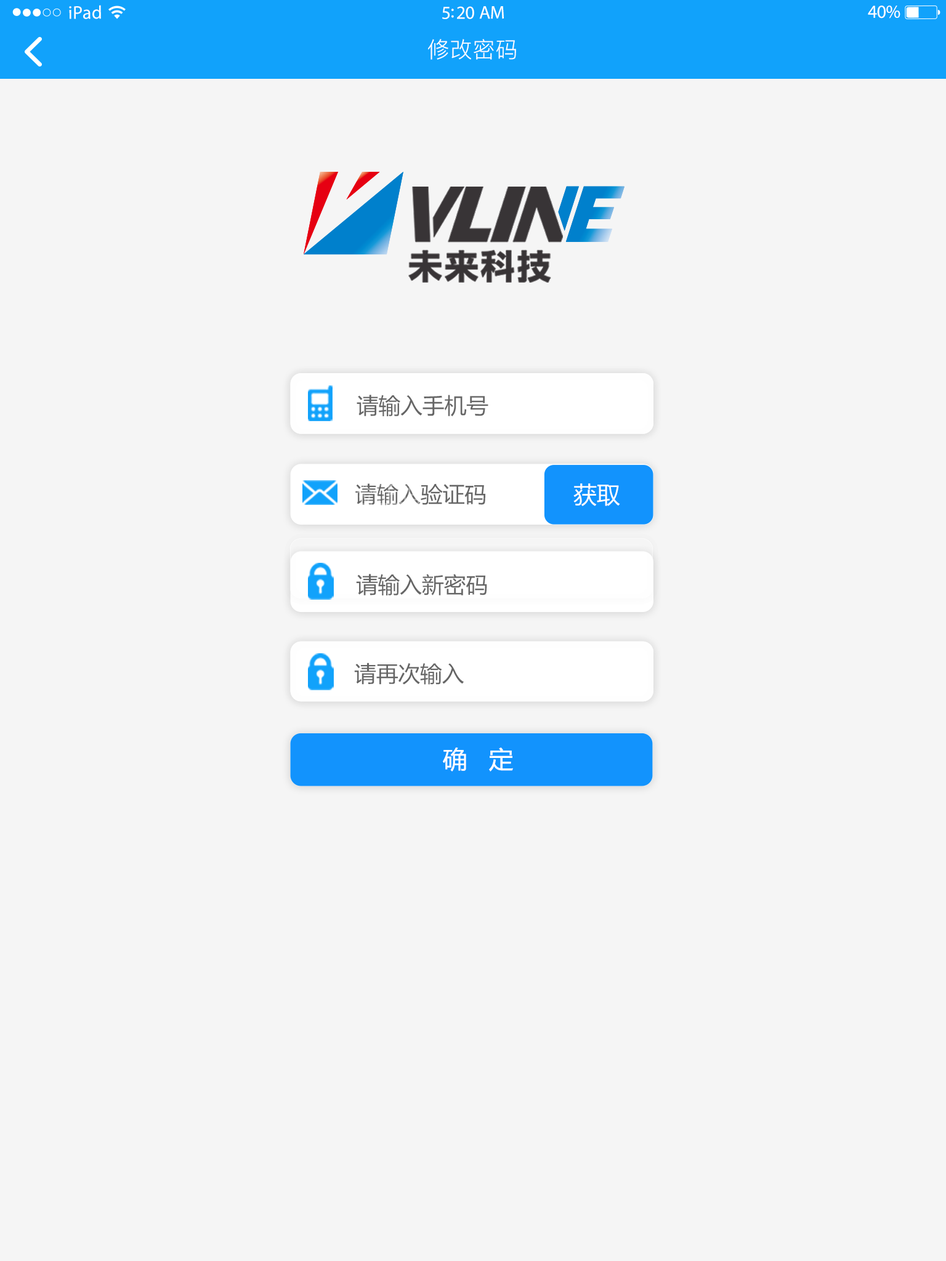
<style>
.page{position:relative;width:946px;height:1261px;background:#f5f5f5}
.page>*{position:absolute;margin:0}
.t1{font:18.5px "MyriadPro-Regular";letter-spacing:0.02em;color:#ffffff}
.t2{font:18.5px "MyriadPro-Regular";letter-spacing:-0.02em;color:#ffffff}
.t3{font:22.2px "PingFang-SC-Regular";letter-spacing:0.03em;color:#ffffff}
.t4{font:22px "MicrosoftYaHei";color:#666666}
.t5{font:23.2px "MicrosoftYaHei";color:#ffffff}
.t6{font:24.4px "MicrosoftYaHei";color:#ffffff}
</style>
<div class="page">
<p class="t1" style="left:69px;top:5px;width:32px;height:14px">iPad</p>
<p class="t2" style="left:867px;top:6px;width:33px;height:12px">40%</p>
<p class="t2" style="left:442px;top:6px;width:62px;height:13px">5:20 AM</p>
<p class="t3" style="left:428px;top:39px;width:88px;height:21px">修改密码</p>
<p class="t4" style="left:356px;top:395px;width:132px;height:22px">请输入手机号</p>
<p class="t4" style="left:355px;top:483px;width:131px;height:22px">请输入验证码</p>
<p class="t5" style="left:573px;top:483px;width:47px;height:23px">获取</p>
<p class="t4" style="left:356px;top:574px;width:131px;height:21px">请输入新密码</p>
<p class="t4" style="left:354px;top:662px;width:110px;height:23px">请再次输入</p>
<p class="t6" style="left:443px;top:747px;width:70px;height:24px">确   定</p>
</div>
